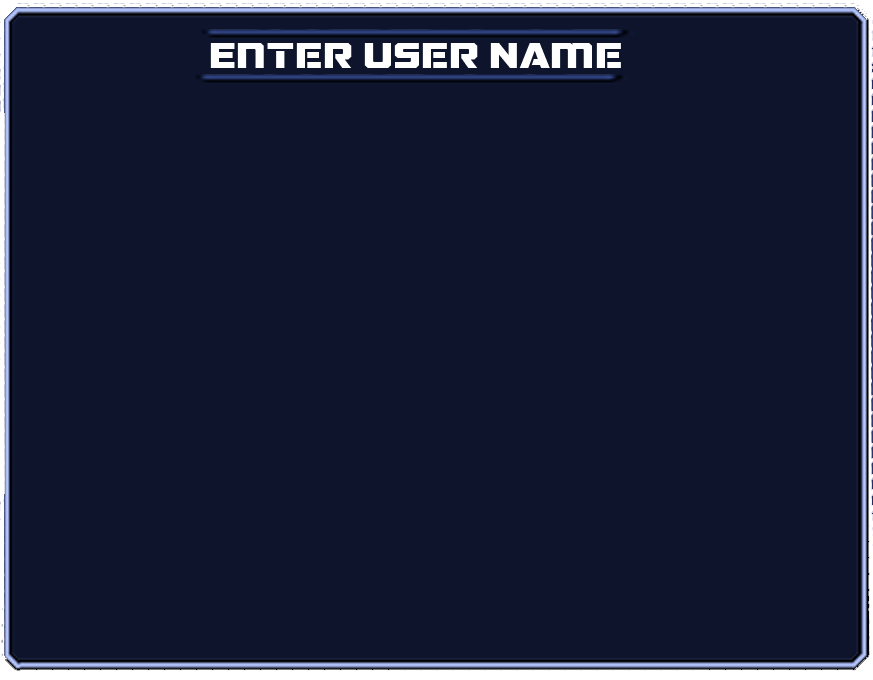
<style>
.page{position:relative;width:873px;height:680px;background:#0d142b}
.page>*{position:absolute;margin:0}
.t1{font:34.5px "GALACTICVANGUARDIANNCV";color:#fefefe;scale:1.08 1}
</style>
<div class="page">
<p class="t1" style="left:210px;top:43px;width:411px;height:25px">Enter User Name</p>
</div>
